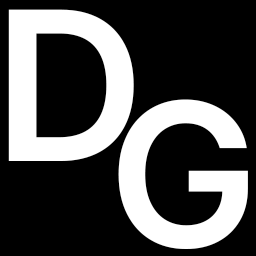
<style>
.page{position:relative;width:256px;height:256px;background:#000000}
.page>*{position:absolute;margin:0}
.t1{font:208.3px "Inter-SemiBold";color:#ffffff;font-weight:bold}
.t2{font:200px "Inter-SemiBold";color:#ffffff;font-weight:bold}
</style>
<div class="page">
<p class="t1" style="left:8px;top:9px;width:126px;height:152px">D</p>
<p class="t2" style="left:118px;top:99px;width:130px;height:150px">G</p>
</div>
